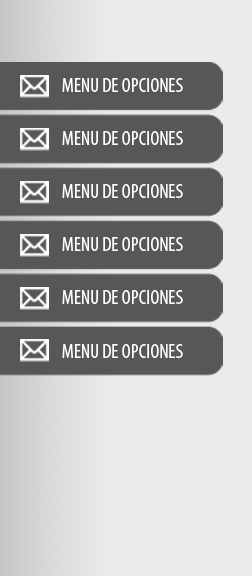
<style>
.page{position:relative;width:252px;height:578px;background:#575756}
.page>*{position:absolute;margin:0}
.t1{font:20.1px "MyriadPro-Cond";color:#ffffff;text-transform:uppercase}
</style>
<div class="page">
<p class="t1" style="left:62px;top:78px;width:121px;height:14px">menu de opciones</p>
<p class="t1" style="left:62px;top:131px;width:121px;height:14px">menu de opciones</p>
<p class="t1" style="left:62px;top:184px;width:121px;height:14px">menu de opciones</p>
<p class="t1" style="left:62px;top:237px;width:121px;height:14px">menu de opciones</p>
<p class="t1" style="left:62px;top:290px;width:121px;height:14px">menu de opciones</p>
<p class="t1" style="left:62px;top:344px;width:121px;height:14px">menu de opciones</p>
</div>
